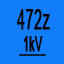
<style>
.page{position:relative;width:64px;height:64px;background:#127dfb}
.page>*{position:absolute;margin:0}
.t1{font:26.9px "ArialMT";letter-spacing:0.02em;color:#060100;font-weight:bold;scale:0.52 1}
.t2{font:20.1px "ArialMT";letter-spacing:0.02em;color:#060100;font-weight:bold;text-decoration:underline;scale:0.52 1}
</style>
<div class="page">
<p class="t1" style="left:17px;top:9px;width:33px;height:21px">472z</p>
<p class="t2" style="left:19px;top:36px;width:27px;height:20px">1kV</p>
</div>
